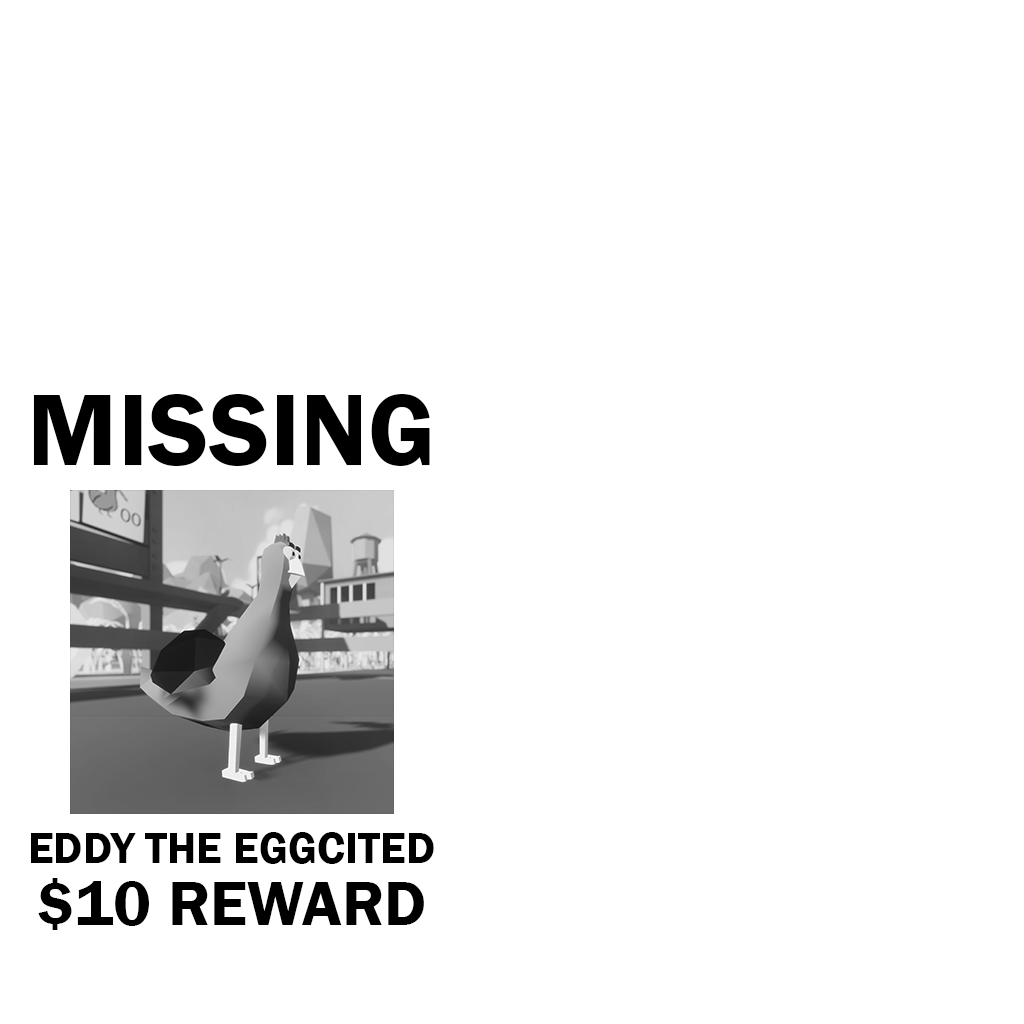
<style>
.page{position:relative;width:1024px;height:1024px;background:#ffffff}
.page>*{position:absolute;margin:0}
.t1{font:105px "FranklinGothic-Demi";color:#000000}
.t2{font:45px "FranklinGothic-Demi";color:#000000}
.t3{font:65px "FranklinGothic-Demi";color:#000000}
</style>
<div class="page">
<p class="t1" style="left:33px;top:394px;width:397px;height:72px">MISSING</p>
<p class="t2" style="left:31px;top:832px;width:403px;height:32px">EDDY THE EGGCITED</p>
<p class="t3" style="left:38px;top:878px;width:386px;height:52px">$10 REWARD</p>
</div>
